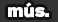
<style>
.page{position:relative;width:58px;height:22px;background:#333333}
.page>*{position:absolute;margin:0}
.t1{font:17.3px "RodinPro-UB";letter-spacing:-0.03em;color:#fefdfe}
</style>
<div class="page">
<p class="t1" style="left:8px;top:2px;width:41px;height:16px">mús.</p>
</div>
